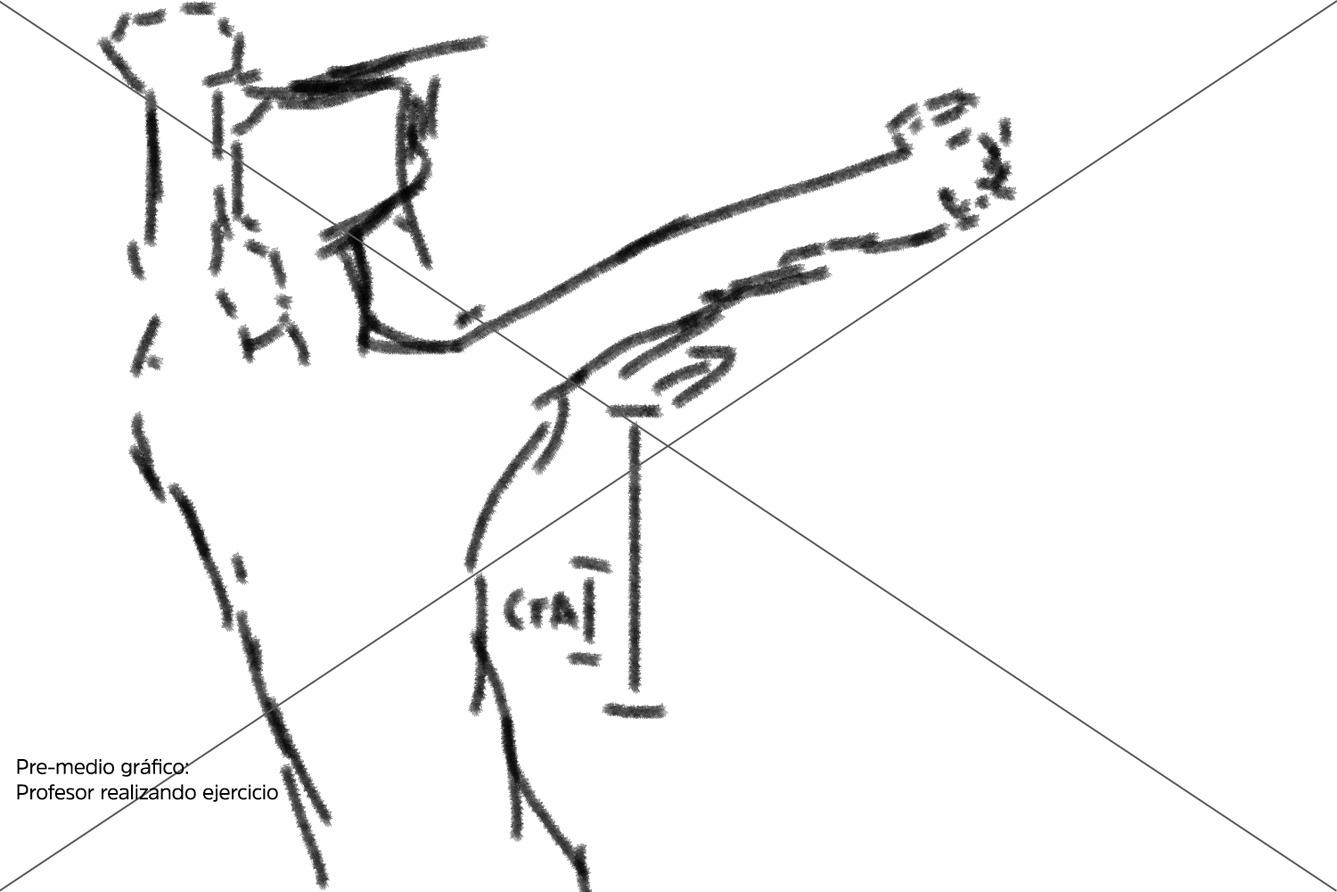
<style>
.page{position:relative;width:1337px;height:892px;background:#ffffff}
.page>*{position:absolute;margin:0}
.t1{font:21.1px "AmsiPro-Regular";letter-spacing:-0.025em;color:#000000}
</style>
<div class="page">
<p class="t1" style="left:17px;top:758px;width:261px;height:44px">Pre-medio gráfico:<br>Profesor realizando ejercicio</p>
</div>
